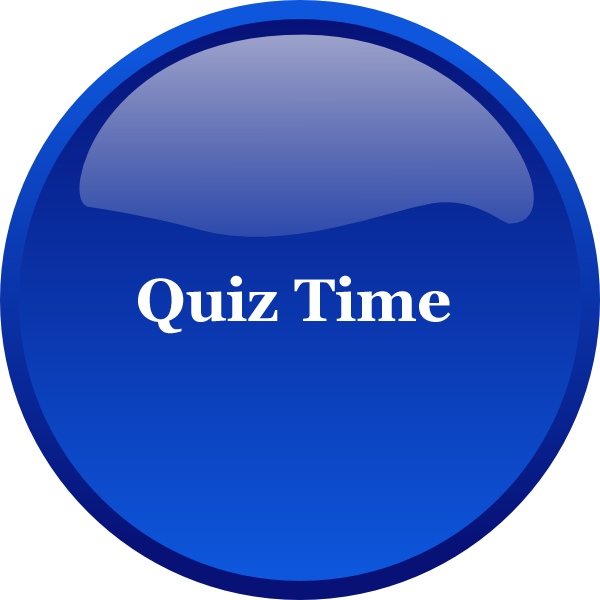
<style>
.page{position:relative;width:600px;height:600px;background:#ffffff}
.page>*{position:absolute;margin:0}
.t1{font:60px "Vani-Bold";color:#ffffff}
.t2{font:24px "Courier-Bold";color:#000000}
</style>
<div class="page">
<p class="t1" style="left:127px;top:231px;width:334px;height:140px;text-align:center"><span class="t2"><br></span>Quiz Time</p>
</div>
